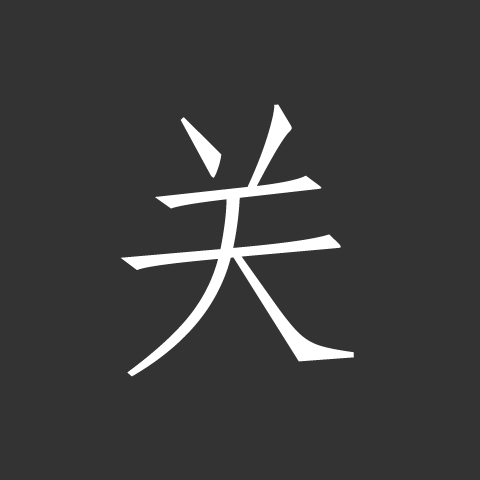
<style>
.page{position:relative;width:480px;height:480px;background:#333333}
.page>*{position:absolute;margin:0}
.t1{font:288px "STFangsong";color:#ffffff}
</style>
<div class="page">
<p class="t1" style="left:120px;top:104px;width:234px;height:273px">关</p>
</div>
